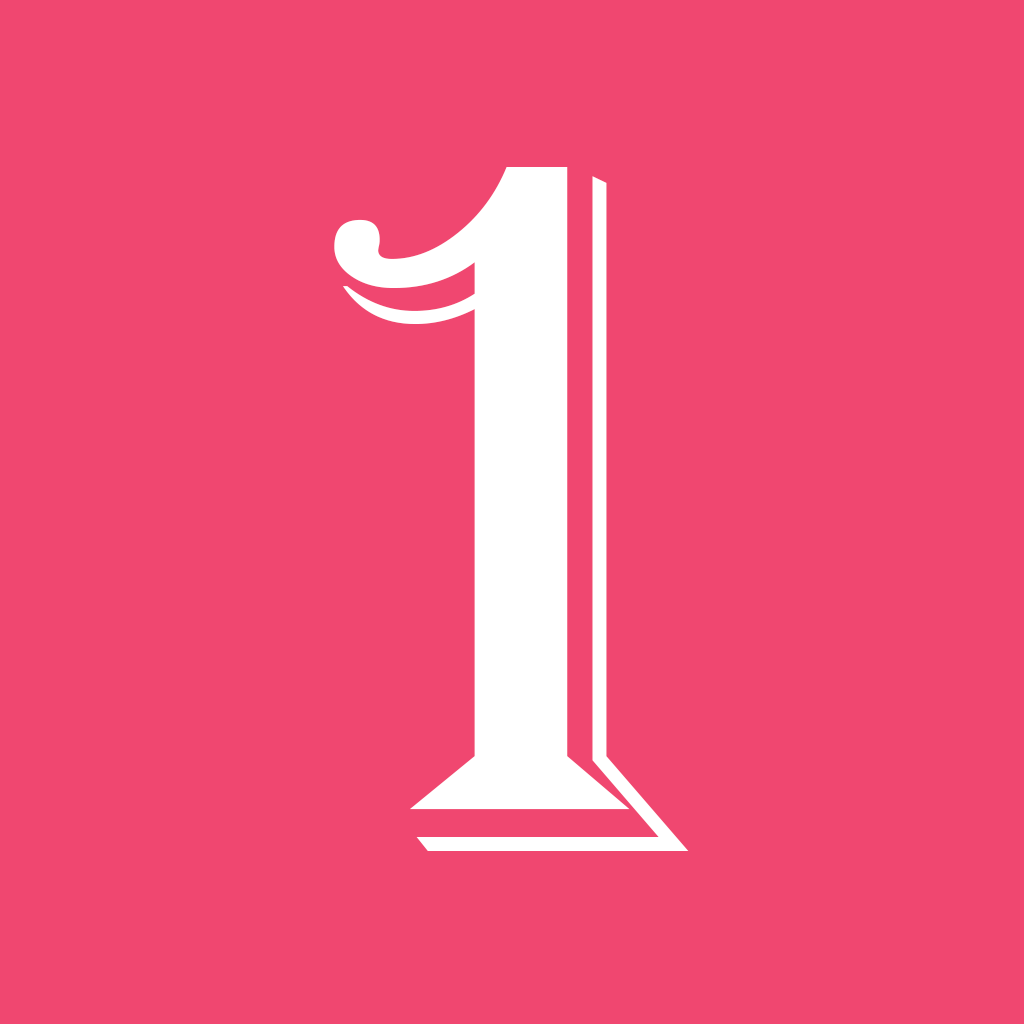
<style>
.page{position:relative;width:1024px;height:1024px;background:#f04770}
.page>*{position:absolute;margin:0}
.t1{font:1041px "Algerian";color:#ffffff}
</style>
<div class="page">
<p class="t1" style="left:334px;top:167px;width:355px;height:684px">1</p>
</div>
